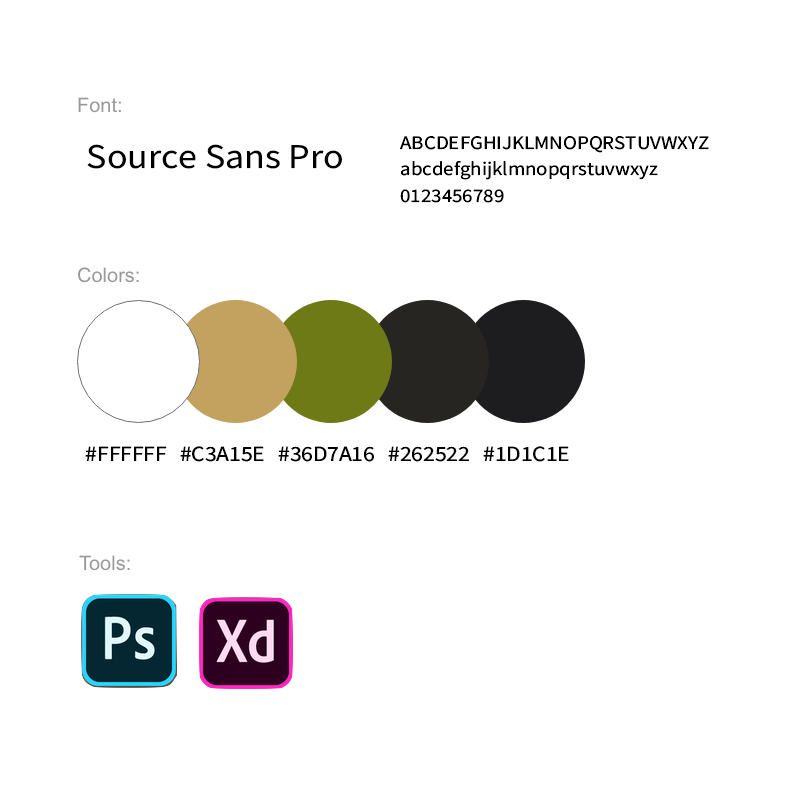
<style>
.page{position:relative;width:800px;height:800px;background:#ffffff}
.page>*{position:absolute;margin:0}
.t1{font:19.1px "SourceSansRoman-Regular";color:#000000;scale:1.09 1}
.t2{font:34.8px "SourceSansRoman-Regular";color:#000000;scale:1.09 1}
.t3{font:21.8px "SourceSansRoman-Regular";letter-spacing:-0.009em;color:#000000;scale:1.09 1}
</style>
<div class="page">
<p class="t1" style="left:400px;top:136px;width:309px;height:67px">ABCDEFGHIJKLMNOPQRSTUVWXYZ<br>abcdefghijklmnopqrstuvwxyz<br>0123456789</p>
<p class="t2" style="left:87px;top:144px;width:255px;height:25px">Source Sans Pro</p>
<p class="t3" style="left:85px;top:446px;width:484px;height:16px">#FFFFFF   #C3A15E   #36D7A16   #262522   #1D1C1E</p>
</div>
